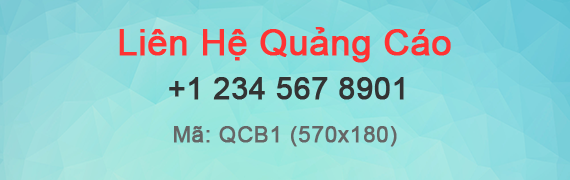
<style>
.page{position:relative;width:570px;height:180px}
.page>*{position:absolute;margin:0}
.t1{font:36px "ArialMT";color:#ff3333;font-weight:bold}
.t2{font:30px "ArialMT";color:#333333;font-weight:bold}
.t3{font:22px "ArialMT";color:#666666;font-weight:bold}
</style>
<div class="page">
<p class="t1" style="left:119px;top:27px;width:332px;height:36px">Liên Hệ Quảng Cáo</p>
<p class="t2" style="left:169px;top:77px;width:235px;height:23px">+1 234 567 8901</p>
<p class="t3" style="left:174px;top:126px;width:223px;height:21px">Mã: QCB1 (570x180)</p>
</div>
